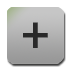
<style>
.page{position:relative;width:70px;height:70px;background:#ffffff}
.page>*{position:absolute;margin:0}
.t1{font:48px "MyriadPro-Bold";color:#292929}
</style>
<div class="page">
<p class="t1" style="left:23px;top:22px;width:25px;height:26px">+</p>
</div>
